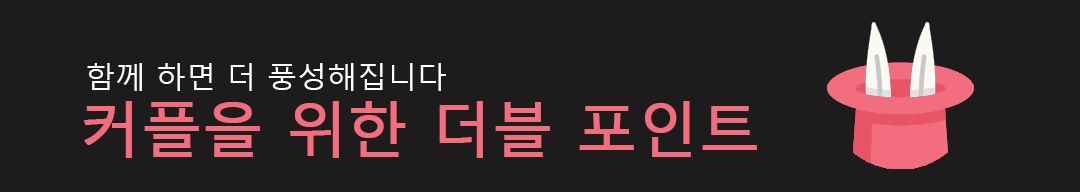
<style>
.page{position:relative;width:1080px;height:192px;background:#1d1b1b}
.page>*{position:absolute;margin:0}
.t1{font:30px "MalgunGothicRegular";color:#ffffff}
.t2{font:60px "MalgunGothicRegular";letter-spacing:-0.005em;color:#f26d7d;font-weight:bold}
</style>
<div class="page">
<p class="t1" style="left:87px;top:63px;width:359px;height:28px">함께 하면 더 풍성해집니다</p>
<p class="t2" style="left:84px;top:101px;width:673px;height:57px">커플을 위한 더블 포인트</p>
</div>
